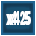
<style>
.page{position:relative;width:36px;height:36px;background:#ffffff}
.page>*{position:absolute;margin:0}
.t1{font:18px "AvantGarde-Bold";color:#ffffff;scale:0.5 1}
.t2{font:18px "AvantGarde-Bold";color:#ffffff;scale:0.6 1}
</style>
<div class="page">
<p class="t1" style="left:6px;top:11px;width:25px;height:14px">x4.25</p>
<p class="t2" style="left:7px;top:11px;width:23px;height:14px">x4.5</p>
</div>
